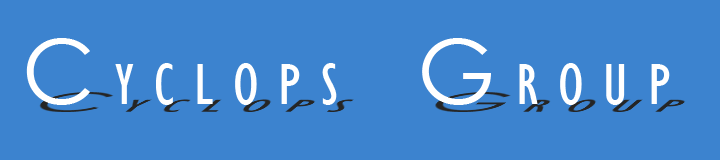
<style>
.page{position:relative;width:720px;height:160px;background:#3c83cf}
.page>*{position:absolute;margin:0}
.t1{font:60px "GillSansMT-Condensed";color:#ffffff}
.t2{font:90px "CenturyGothic";color:#ffffff}
</style>
<div class="page">
<p class="t1" style="left:26px;top:38px;width:644px;height:67px"><span class="t2">C</span> Y C L O P S    <span class="t2">G</span> R O U P</p>
</div>
